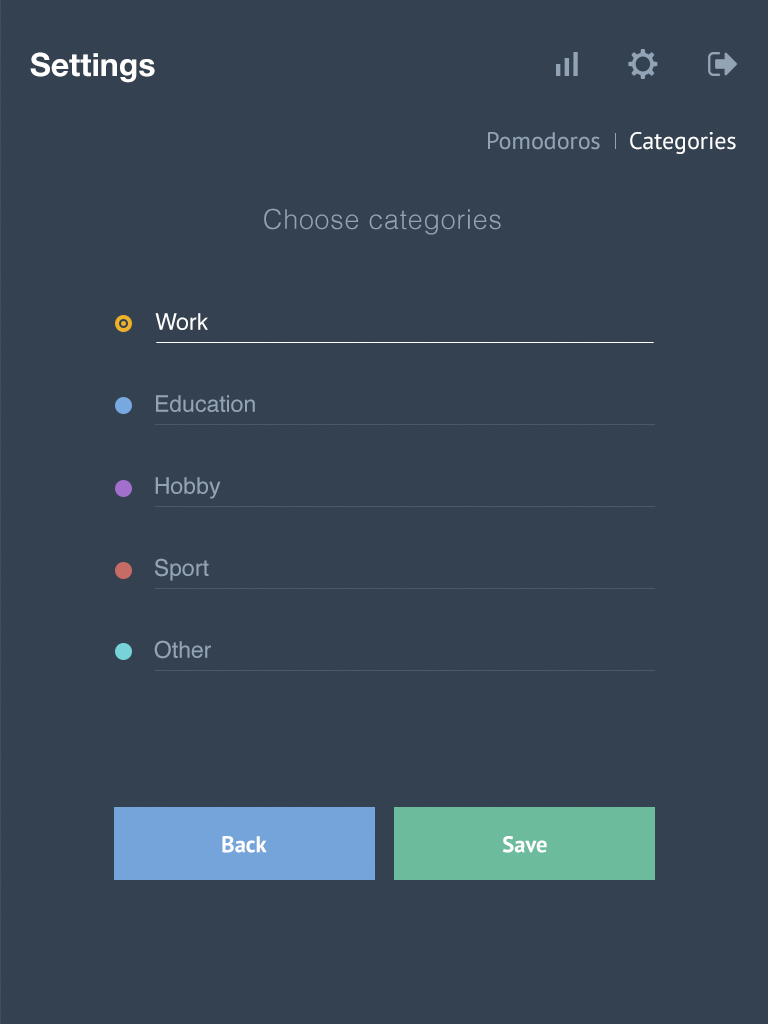
<style>
.page{position:relative;width:768px;height:1024px;background:#344150}
.page>*{position:absolute;margin:0}
.t1{font:32px "HelveticaNeue-Bold";color:#ffffff}
.t2{font:24px "PTSans-Regular";color:#93a3b6}
.t3{font:24px "PTSans-Regular";color:#ffffff}
.t4{font:27px "Helvetica-Light";letter-spacing:0.025em;color:#93a3b6}
.t5{font:23px "Helvetica";color:#ffffff}
.t6{font:23px "Helvetica";color:#93a3b6}
.t7{font:22.6px "PTSans-Bold";color:#ffffff}
</style>
<div class="page">
<p class="t1" style="left:30px;top:52px;width:125px;height:31px">Settings</p>
<p class="t2" style="left:488px;top:132px;width:112px;height:18px">Pomodoros</p>
<p class="t3" style="left:630px;top:132px;width:106px;height:22px">Categories</p>
<p class="t4" style="left:264px;top:208px;width:237px;height:27px">Choose categories</p>
<p class="t5" style="left:155px;top:313px;width:53px;height:17px">Work</p>
<p class="t6" style="left:156px;top:395px;width:99px;height:17px">Education</p>
<p class="t6" style="left:155px;top:477px;width:66px;height:22px">Hobby</p>
<p class="t6" style="left:155px;top:558px;width:54px;height:23px">Sport</p>
<p class="t6" style="left:154px;top:640px;width:57px;height:19px">Other</p>
<p class="t7" style="left:222px;top:836px;width:45px;height:17px">Back</p>
<p class="t7" style="left:502px;top:836px;width:45px;height:17px">Save</p>
</div>
